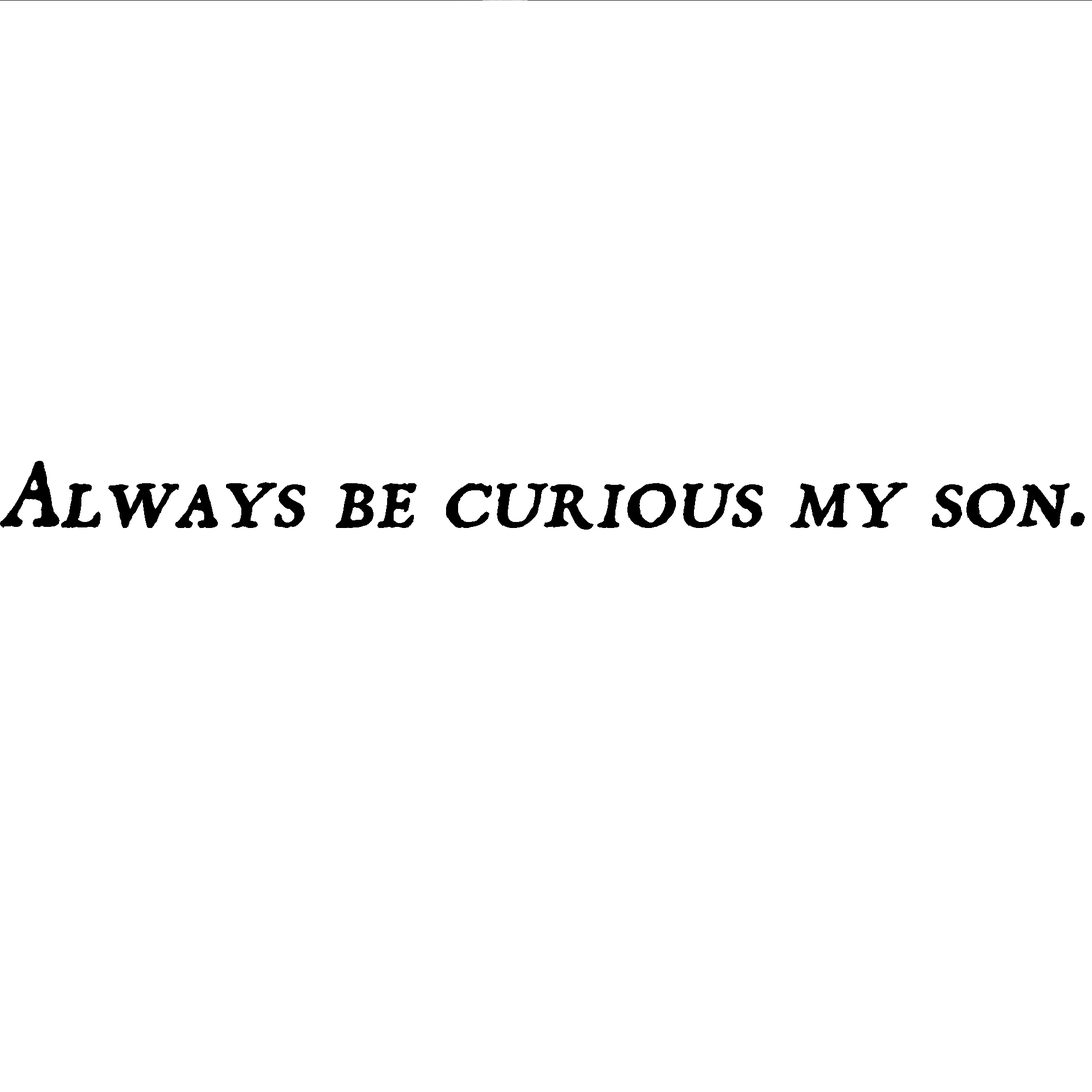
<style>
.page{position:relative;width:1092px;height:1092px;background:#ffffff}
.page>*{position:absolute;margin:0}
.t1{font:81.9px "DominicanSmallCaps";color:#000000;font-style:italic}
</style>
<div class="page">
<p class="t1" style="left:0px;top:460px;width:1085px;height:69px">Always be curious my son.</p>
</div>
